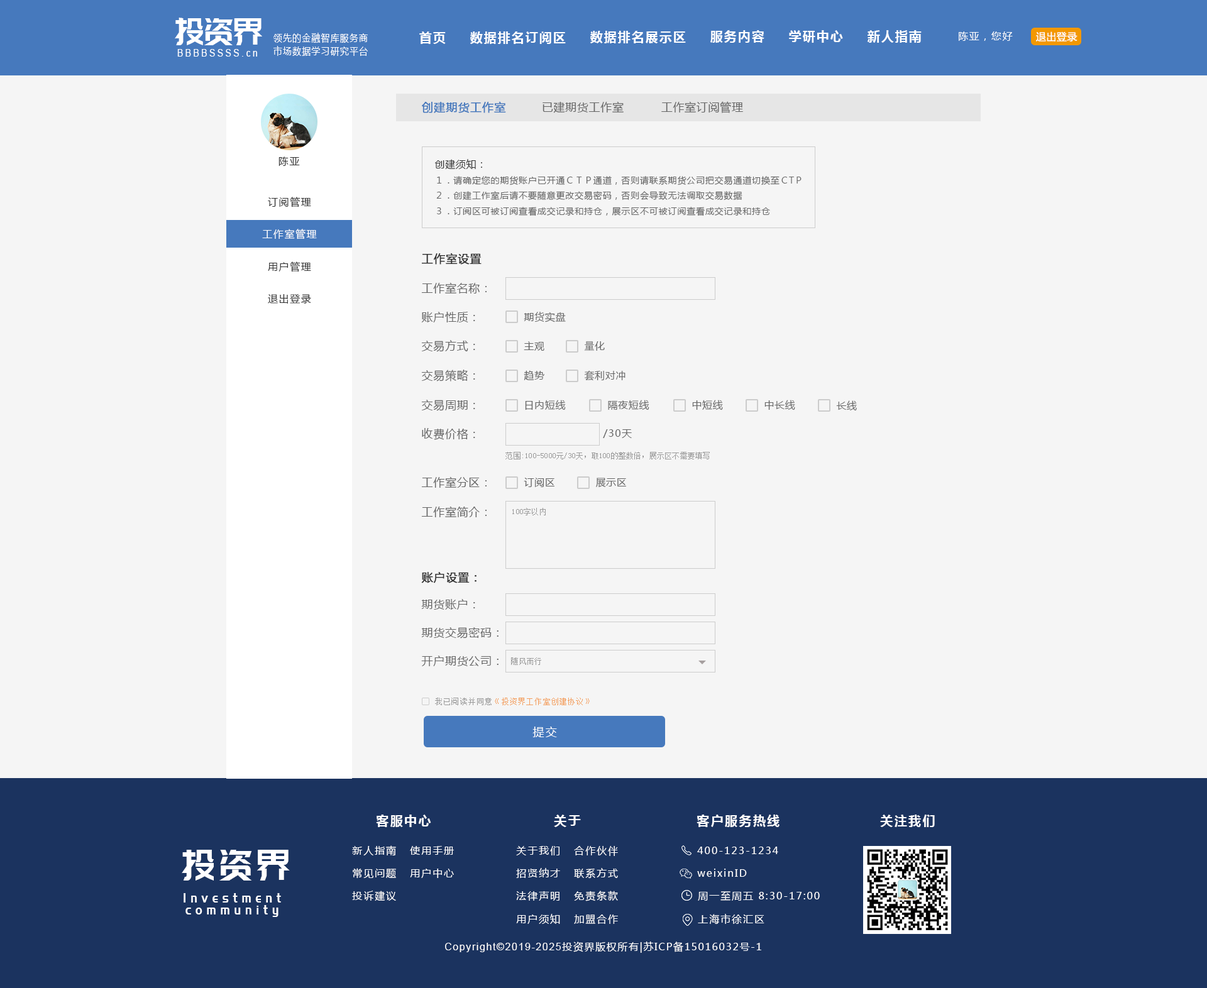
<style>
.page{position:relative;width:1207px;height:988px;background:#f5f5f5}
.page>*{position:absolute;margin:0}
.t1{font:37.4px "PangMenZhengDao";color:#ffffff;scale:0.86 1}
.t2{font:10.1px "MicrosoftYaHei";letter-spacing:0.1em;color:#ffffff;scale:0.86 1}
.t3{font:12.6px "MicrosoftYaHei-Bold";letter-spacing:0.1em;color:#ffffff}
.t4{font:10.1px "MicrosoftYaHei";letter-spacing:0.1em;color:#ffffff}
.t5{font:10.1px "MicrosoftYaHei";letter-spacing:0.03em;color:#ffffff}
.t6{font:10.1px "ArialMT";letter-spacing:0.26em;color:#ffffff;scale:0.86 1}
.t7{font:11.3px "MicrosoftYaHei";letter-spacing:0.04em;color:#4679bd;font-weight:bold}
.t8{font:11.3px "MicrosoftYaHei";letter-spacing:0.04em;color:#666666}
.t9{font:10.1px "MicrosoftYaHei";letter-spacing:0.1em;color:#333333}
.t10{font:10.1px "MicrosoftYaHei";letter-spacing:0.04em;color:#333333}
.t11{font:8.8px "MicrosoftYaHei";letter-spacing:0.06em;color:#666666}
.t12{font:8.8px "MicrosoftYaHei";letter-spacing:-0.18em;color:#666666}
.t13{font:11.3px "MicrosoftYaHei";letter-spacing:0.04em;color:#333333;font-weight:bold}
.t14{font:10.1px "MicrosoftYaHei";letter-spacing:0.04em;color:#666666}
.t15{font:10.1px "MicrosoftYaHei";letter-spacing:0.08em;color:#666666}
.t16{font:7.5px "SimSun";letter-spacing:0.02em;color:#999999}
.t17{font:7.5px "SimSun";letter-spacing:0.1em;color:#f39e5f}
.t18{font:7.5px "SimSun";letter-spacing:0.1em;color:#999999}
.t19{font:11.3px "MicrosoftYaHei";letter-spacing:0.12em;color:#ffffff}
.t20{font:12.6px "MicrosoftYaHei-Bold";letter-spacing:0.12em;color:#ffffff}
.t21{font:10.1px "MicrosoftYaHei";letter-spacing:0.12em;color:#ffffff}
.t22{font:42.7px "PangMenZhengDao";letter-spacing:0.1em;color:#ffffff;scale:0.86 1}
.t23{font:13.6px/11.9px "PangMenZhengDao";letter-spacing:0.36em;color:#ffffff;scale:0.86 1}
.t24{font:10.1px "ArialMT";letter-spacing:0.1em;color:#ffffff}
</style>
<div class="page">
<p class="t1" style="left:175px;top:18px;width:87px;height:27px">投资界</p>
<p class="t2" style="left:273px;top:33px;width:95px;height:10px">领先的金融智库服务商</p>
<p class="t3" style="left:419px;top:31px;width:27px;height:13px">首页</p>
<p class="t3" style="left:470px;top:31px;width:96px;height:13px">数据排名订阅区</p>
<p class="t3" style="left:590px;top:31px;width:96px;height:12px">数据排名展示区</p>
<p class="t3" style="left:710px;top:30px;width:54px;height:13px">服务内容</p>
<p class="t3" style="left:789px;top:30px;width:54px;height:13px">学研中心</p>
<p class="t3" style="left:867px;top:30px;width:54px;height:13px">新人指南</p>
<p class="t4" style="left:959px;top:31px;width:54px;height:10px">陈亚，您好</p>
<p class="t5" style="left:1036px;top:31px;width:41px;height:10px">退出登录</p>
<p class="t6" style="left:177px;top:49px;width:80px;height:8px">BBBBSSSS.cn</p>
<p class="t2" style="left:273px;top:46px;width:95px;height:10px">市场数据学习研究平台</p>
<p class="t7" style="left:422px;top:101px;width:84px;height:12px">创建期货工作室</p>
<p class="t8" style="left:542px;top:101px;width:82px;height:12px">已建期货工作室</p>
<p class="t8" style="left:661px;top:101px;width:82px;height:12px">工作室订阅管理</p>
<p class="t9" style="left:278px;top:157px;width:22px;height:9px">陈亚</p>
<p class="t10" style="left:434px;top:159px;width:48px;height:11px">创建须知：</p>
<p class="t11" style="left:437px;top:176px;width:364px;height:9px">１．请确定您的期货账户已开通ＣＴＰ通道，否则请联系期货公司把交易通道切换至<span class="t12">ＣＴＰ</span></p>
<p class="t9" style="left:268px;top:197px;width:43px;height:10px">订阅管理</p>
<p class="t11" style="left:436px;top:191px;width:306px;height:10px">２．创建工作室后请不要随意更改交易密码，否则会导致无法调取交易数据</p>
<p class="t11" style="left:437px;top:207px;width:333px;height:9px">３．订阅区可被订阅查看成交记录和持仓，展示区不可被订阅查看成交记录和持仓</p>
<p class="t4" style="left:262px;top:229px;width:55px;height:10px">工作室管理</p>
<p class="t13" style="left:422px;top:253px;width:59px;height:12px">工作室设置</p>
<p class="t9" style="left:268px;top:261px;width:43px;height:11px">用户管理</p>
<p class="t9" style="left:268px;top:294px;width:43px;height:10px">退出登录</p>
<p class="t8" style="left:421px;top:282px;width:66px;height:12px">工作室名称：</p>
<p class="t8" style="left:421px;top:312px;width:54px;height:10px">账户性质：</p>
<p class="t14" style="left:524px;top:312px;width:42px;height:10px">期货实盘</p>
<p class="t8" style="left:421px;top:340px;width:54px;height:12px">交易方式：</p>
<p class="t14" style="left:524px;top:341px;width:20px;height:10px">主观</p>
<p class="t14" style="left:584px;top:341px;width:21px;height:10px">量化</p>
<p class="t8" style="left:421px;top:370px;width:54px;height:12px">交易策略：</p>
<p class="t14" style="left:524px;top:370px;width:20px;height:10px">趋势</p>
<p class="t14" style="left:584px;top:370px;width:41px;height:11px">套利对冲</p>
<p class="t8" style="left:421px;top:400px;width:54px;height:11px">交易周期：</p>
<p class="t14" style="left:525px;top:400px;width:41px;height:10px">日内短线</p>
<p class="t14" style="left:608px;top:400px;width:41px;height:10px">隔夜短线</p>
<p class="t14" style="left:692px;top:400px;width:31px;height:10px">中短线</p>
<p class="t14" style="left:764px;top:400px;width:31px;height:10px">中长线</p>
<p class="t14" style="left:836px;top:400px;width:21px;height:11px">长线</p>
<p class="t8" style="left:422px;top:428px;width:53px;height:12px">收费价格：</p>
<p class="t15" style="left:603px;top:429px;width:29px;height:9px">/30天</p>
<p class="t16" style="left:505px;top:452px;width:205px;height:7px">范围:100-5000元/30天，取100的整数倍，展示区不需要填写</p>
<p class="t8" style="left:421px;top:476px;width:66px;height:12px">工作室分区：</p>
<p class="t14" style="left:524px;top:478px;width:30px;height:9px">订阅区</p>
<p class="t14" style="left:596px;top:478px;width:30px;height:9px">展示区</p>
<p class="t8" style="left:421px;top:506px;width:66px;height:11px">工作室简介：</p>
<p class="t16" style="left:512px;top:508px;width:34px;height:7px">100字以内</p>
<p class="t13" style="left:421px;top:572px;width:55px;height:11px">账户设置：</p>
<p class="t8" style="left:421px;top:599px;width:54px;height:11px">期货账户：</p>
<p class="t8" style="left:421px;top:627px;width:77px;height:12px">期货交易密码：</p>
<p class="t8" style="left:421px;top:656px;width:77px;height:10px">开户期货公司：</p>
<p class="t16" style="left:511px;top:657px;width:30px;height:8px">随风而行</p>
<p class="t17" style="left:435px;top:698px;width:155px;height:7px"><span class="t18">我已阅读并同意</span>《投资界工作室创建协议》</p>
<p class="t19" style="left:532px;top:727px;width:25px;height:10px">提交</p>
<p class="t20" style="left:376px;top:815px;width:55px;height:12px">客服中心</p>
<p class="t20" style="left:554px;top:815px;width:27px;height:12px">关于</p>
<p class="t20" style="left:696px;top:815px;width:83px;height:12px">客户服务热线</p>
<p class="t20" style="left:880px;top:815px;width:55px;height:12px">关注我们</p>
<p class="t21" style="left:352px;top:845px;width:44px;height:11px">新人指南</p>
<p class="t22" style="left:182px;top:850px;width:108px;height:31px">投资界</p>
<p class="t21" style="left:410px;top:846px;width:44px;height:9px">使用手册</p>
<p class="t21" style="left:516px;top:846px;width:43px;height:9px">关于我们</p>
<p class="t21" style="left:574px;top:846px;width:44px;height:10px">合作伙伴</p>
<p class="t21" style="left:697px;top:847px;width:81px;height:7px">400-123-1234</p>
<p class="t21" style="left:353px;top:868px;width:43px;height:11px">常见问题</p>
<p class="t21" style="left:410px;top:869px;width:44px;height:9px">用户中心</p>
<p class="t21" style="left:516px;top:868px;width:44px;height:10px">招贤纳才</p>
<p class="t21" style="left:574px;top:868px;width:44px;height:11px">联系方式</p>
<p class="t21" style="left:697px;top:869px;width:50px;height:8px">weixinID</p>
<p class="t23" style="left:184px;top:893px;width:97px;height:24px;text-align:center">Investment<br>community</p>
<p class="t21" style="left:352px;top:891px;width:44px;height:10px">投诉建议</p>
<p class="t21" style="left:516px;top:891px;width:43px;height:10px">法律声明</p>
<p class="t21" style="left:574px;top:891px;width:44px;height:10px">免责条款</p>
<p class="t21" style="left:698px;top:891px;width:122px;height:10px">周一至周五 8:30-17:00</p>
<p class="t21" style="left:516px;top:914px;width:44px;height:10px">用户须知</p>
<p class="t21" style="left:574px;top:915px;width:44px;height:9px">加盟合作</p>
<p class="t21" style="left:698px;top:914px;width:66px;height:11px">上海市徐汇区</p>
<p class="t4" style="left:445px;top:942px;width:316px;height:11px"><span class="t24">Copyright©2019-2025</span>投资界版权所有|苏ICP备15016032号-1</p>
</div>
